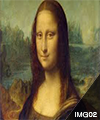
<style>
.page{position:relative;width:100px;height:120px}
.page>*{position:absolute;margin:0}
.t1{font:6.7px "New-Gulim";color:#ffffff;scale:1.13 1}
</style>
<div class="page">
<p class="t1" style="left:75px;top:112px;width:22px;height:6px">IMG02</p>
</div>
